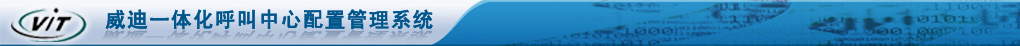
<style>
.page{position:relative;width:1020px;height:46px}
.page>*{position:absolute;margin:0}
.t1{font:20.8px "SimHei";letter-spacing:0.05em;color:#00558b;font-weight:bold}
.t2{font:17.7px "SimHei";letter-spacing:0.05em;font-weight:bold;scale:1.15 1}
</style>
<div class="page">
<p class="t1" style="left:105px;top:9px;width:328px;height:21px">威迪一体化呼叫中心配置管理系统</p>
<p class="t2" style="left:99px;top:30px;width:333px;height:14px">威迪一体化呼叫中心配置管理系统</p>
</div>
